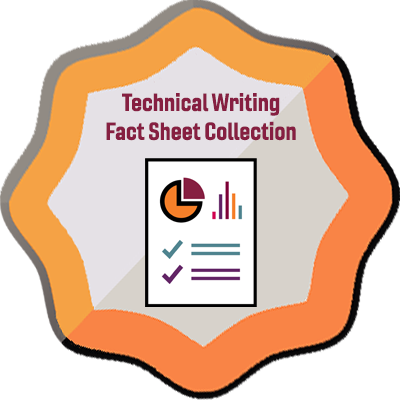
<style>
.page{position:relative;width:400px;height:400px;background:#ffffff}
.page>*{position:absolute;margin:0}
.t1{font:24px "Gineso-ConBol";color:#861f41}
</style>
<div class="page">
<p class="t1" style="left:106px;top:93px;width:190px;height:48px;text-align:center">Technical Writing<br>Fact Sheet Collection</p>
</div>
